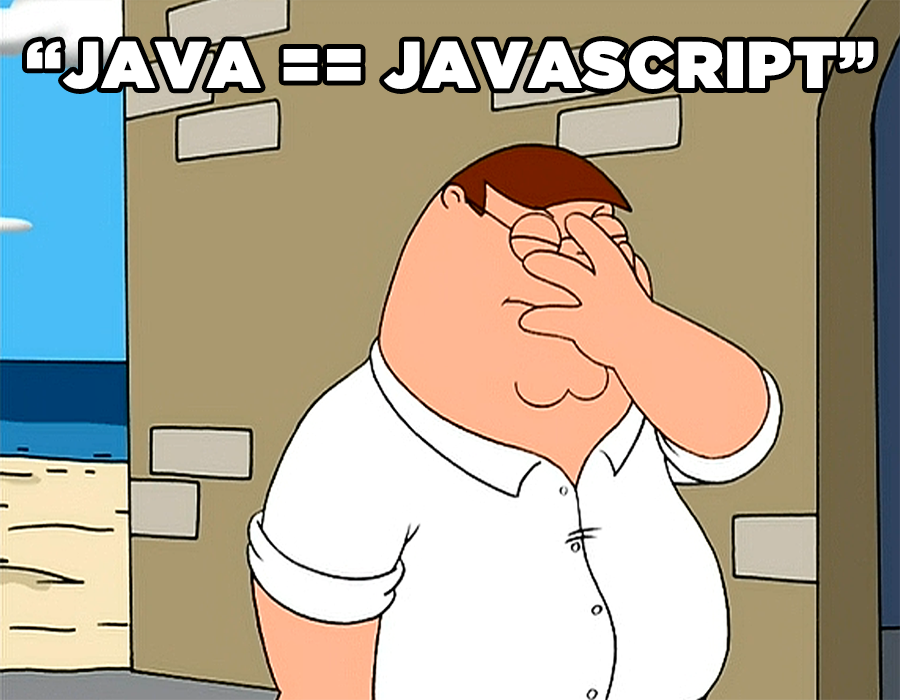
<style>
.page{position:relative;width:900px;height:700px;background:#aa996f}
.page>*{position:absolute;margin:0}
.t1{font:65px "GothamUltra";color:#ffffff;font-weight:bold}
</style>
<div class="page">
<p class="t1" style="left:27px;top:40px;width:847px;height:49px">“JAVA == JAVASCRIPT”</p>
</div>
